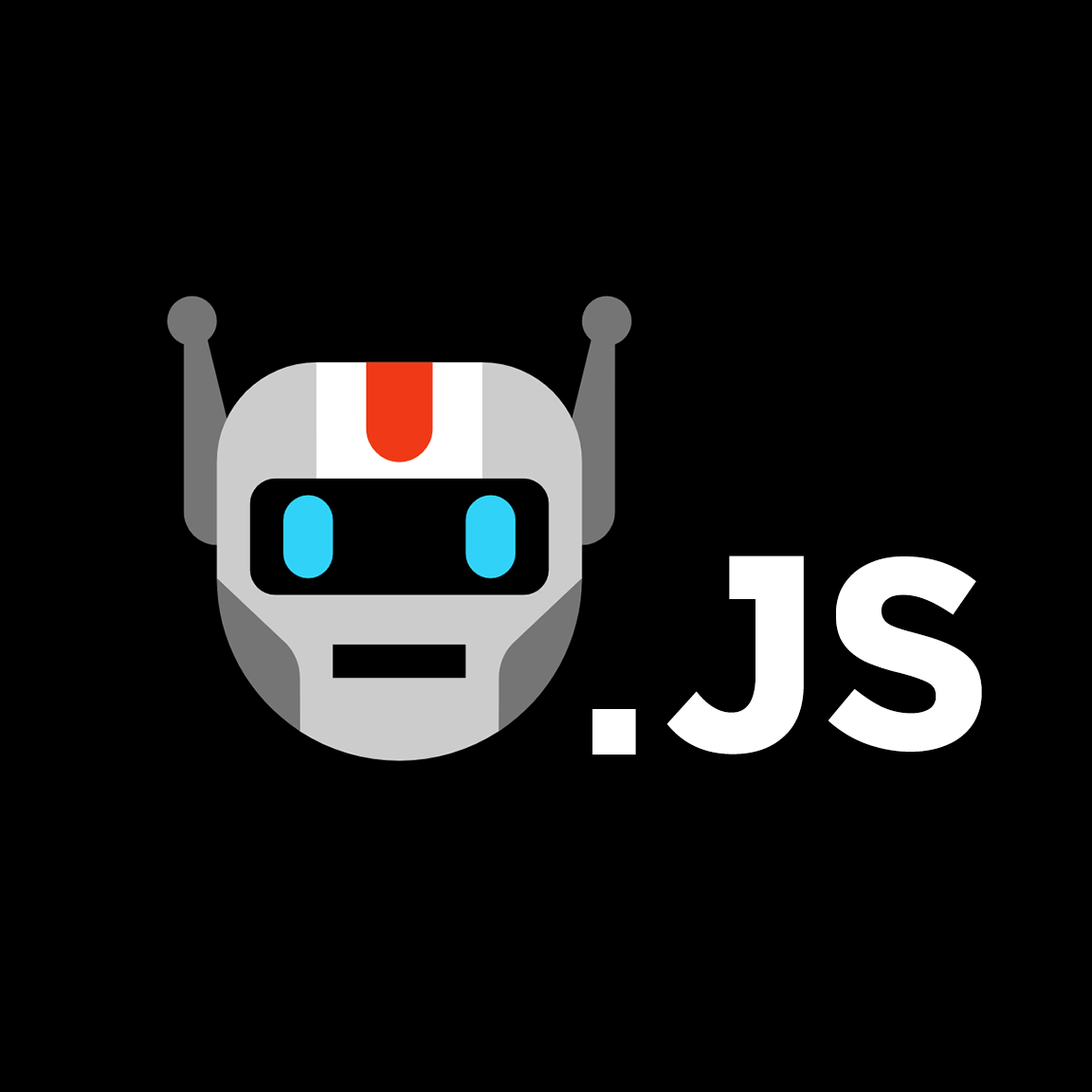
<style>
.page{position:relative;width:1092px;height:1092px;background:#000000}
.page>*{position:absolute;margin:0}
.t1{font:272.3px "BabaPro-Bold";letter-spacing:-0.02em;color:#ffffff}
.t2{font:272.3px "BabaPro-Bold";letter-spacing:-0.02em;color:#ffffff;scale:0.89 1}
</style>
<div class="page">
<p class="t1" style="left:667px;top:555px;width:137px;height:200px">j</p>
<p class="t1" style="left:828px;top:556px;width:154px;height:196px">s</p>
<p class="t2" style="left:592px;top:709px;width:44px;height:46px">.</p>
</div>
